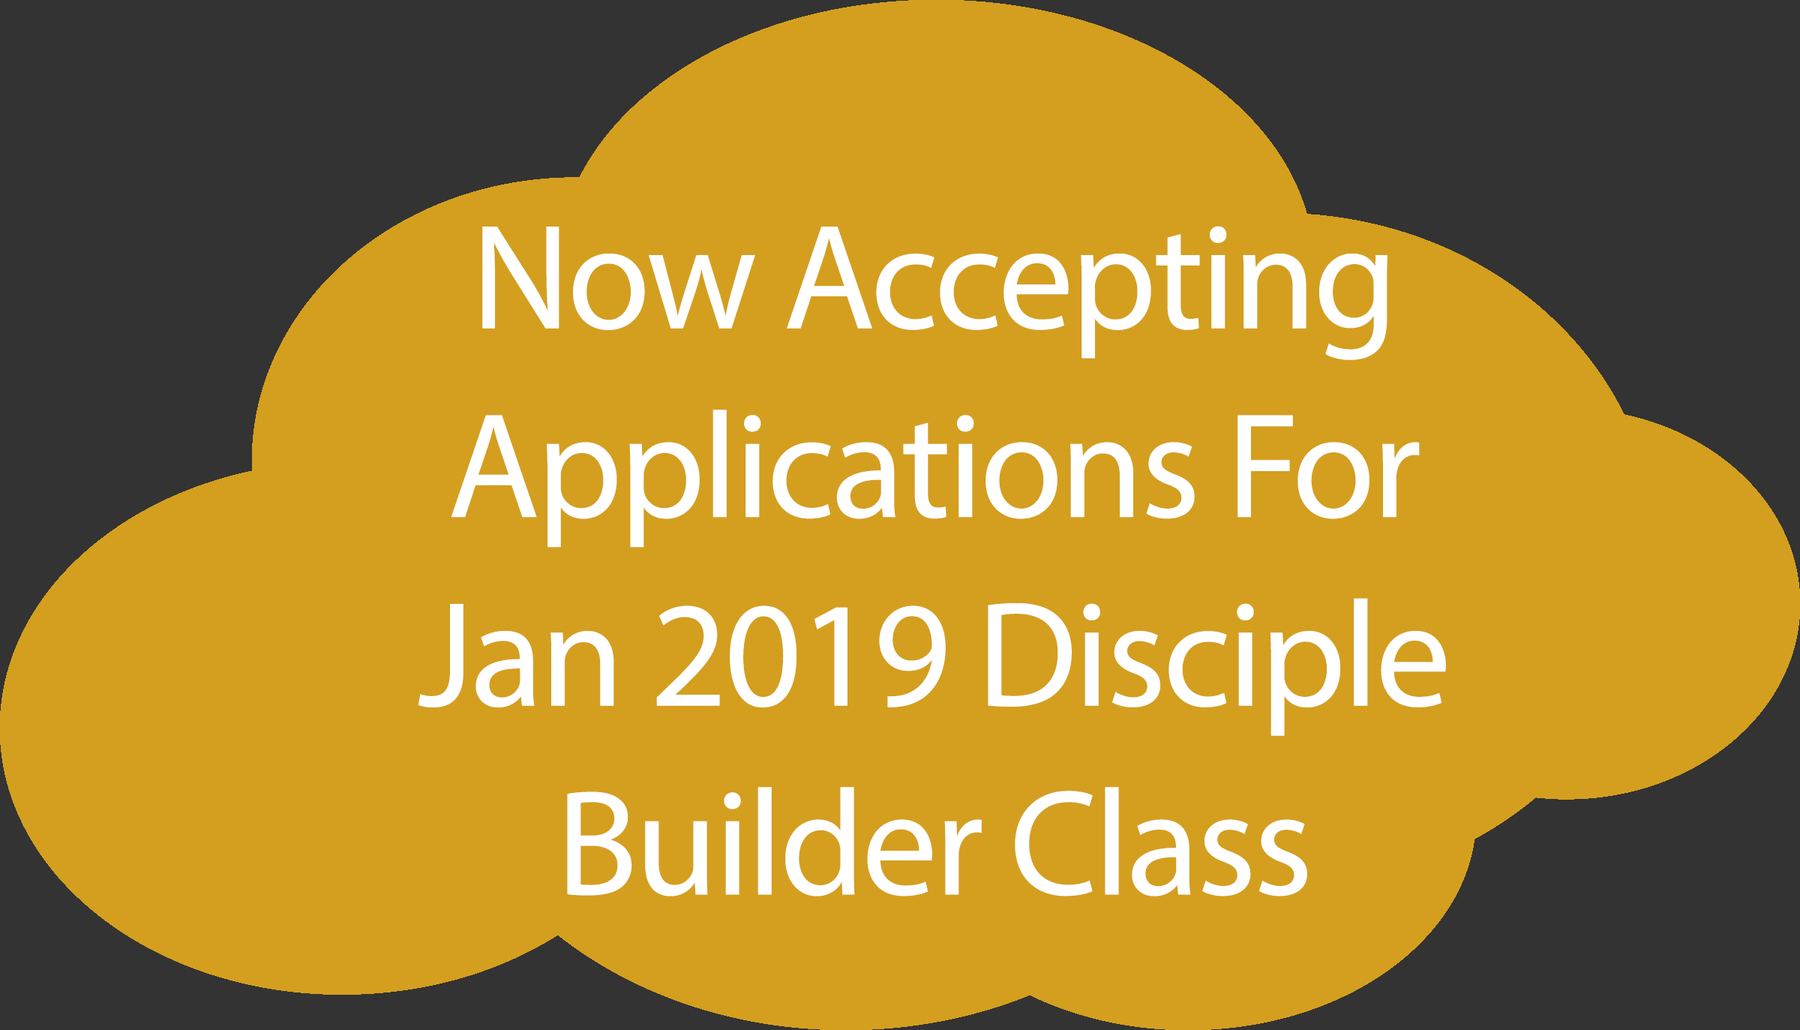
<style>
.page{position:relative;width:1800px;height:1030px;background:#d49f1f}
.page>*{position:absolute;margin:0}
.t1{font:9px/188.7px "MyriadPro-Regular";letter-spacing:-0.02em;color:#ffffff}
</style>
<div class="page">
<p class="t1" style="left:418px;top:226px;width:1028px;height:670px;text-align:center">Now Accepting<br>Applications For<br>Jan 2019 Disciple<br>Builder Class</p>
</div>
